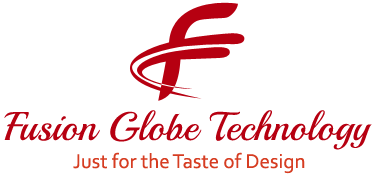
<style>
.page{position:relative;width:375px;height:177px;background:#ffffff}
.page>*{position:absolute;margin:0}
.t1{font:40px "Playball-Regular";color:#b60011}
.t2{font:21px "Corbel";color:#d63d22}
</style>
<div class="page">
<p class="t1" style="left:4px;top:110px;width:368px;height:40px">Fusion Globe Technology</p>
<p class="t2" style="left:73px;top:152px;width:232px;height:22px">Just for the Taste of Design</p>
</div>
